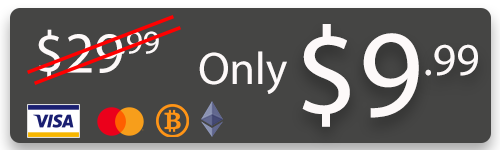
<style>
.page{position:relative;width:500px;height:150px;background:#454544}
.page>*{position:absolute;margin:0}
.t1{font:58.3px "MyriadPro-Regular";color:#fdf9f9}
.t2{font:125px "MyriadPro-Regular";color:#fdf9f9}
.t3{font:33.3px "MyriadPro-Regular";color:#fdf9f9}
.t4{font:45.8px "MyriadPro-Regular";color:#fdf9f9}
</style>
<div class="page">
<p class="t1" style="left:38px;top:29px;width:85px;height:49px">$29</p>
<p class="t2" style="left:302px;top:24px;width:117px;height:103px">$9</p>
<p class="t3" style="left:120px;top:31px;width:39px;height:23px">.99</p>
<p class="t4" style="left:199px;top:51px;width:88px;height:43px">Only</p>
<p class="t4" style="left:425px;top:44px;width:53px;height:32px">.99</p>
</div>
